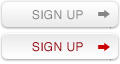
<style>
.page{position:relative;width:120px;height:64px}
.page>*{position:absolute;margin:0}
.t1{font:12px "Helvetica";letter-spacing:0.03em;color:#858585}
.t2{font:12px "Helvetica";letter-spacing:0.03em;color:#941116}
</style>
<div class="page">
<p class="t1" style="left:32px;top:10px;width:51px;height:10px">SIGN UP</p>
<p class="t2" style="left:32px;top:42px;width:51px;height:10px">SIGN UP</p>
</div>
